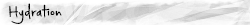
<style>
.page{position:relative;width:250px;height:25px}
.page>*{position:absolute;margin:0}
.t1{font:24px "SmallTownSkyline";letter-spacing:0.03em;color:#000000}
</style>
<div class="page">
<p class="t1" style="left:9px;top:3px;width:53px;height:21px">Hydration</p>
</div>
